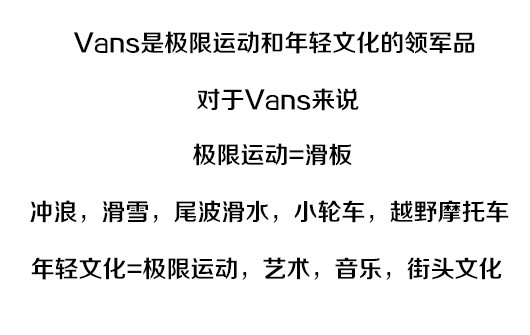
<style>
.page{position:relative;width:530px;height:335px;background:#ffffff}
.page>*{position:absolute;margin:0}
.t1{font:24px "FZZZHONGJW--GB1-0";color:#030303}
</style>
<div class="page">
<p class="t1" style="left:73px;top:31px;width:402px;height:23px">Vans是极限运动和年轻文化的领军品</p>
<p class="t1" style="left:197px;top:88px;width:162px;height:23px">对于Vans来说</p>
<p class="t1" style="left:193px;top:143px;width:159px;height:23px">极限运动=滑板</p>
<p class="t1" style="left:30px;top:200px;width:479px;height:23px">冲浪，滑雪，尾波滑水，小轮车，越野摩托车</p>
<p class="t1" style="left:31px;top:257px;width:471px;height:23px">年轻文化=极限运动，艺术，音乐，街头文化</p>
</div>
